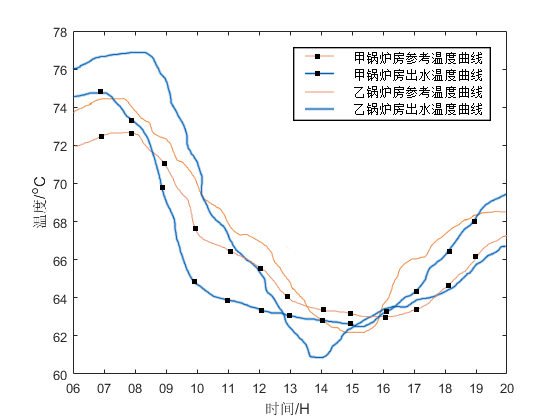
<style>
.page{position:relative;width:560px;height:420px;background:#ffffff}
.page>*{position:absolute;margin:0}
.t1{font:13.3px "SimSun";color:#000000}
</style>
<div class="page">
<p class="t1" style="left:355px;top:52px;width:127px;height:12px">甲锅炉房参考温度曲线</p>
<p class="t1" style="left:355px;top:69px;width:127px;height:12px">甲锅炉房出水温度曲线</p>
<p class="t1" style="left:354px;top:86px;width:128px;height:12px">乙锅炉房参考温度曲线</p>
<p class="t1" style="left:354px;top:103px;width:128px;height:12px">乙锅炉房出水温度曲线</p>
</div>
